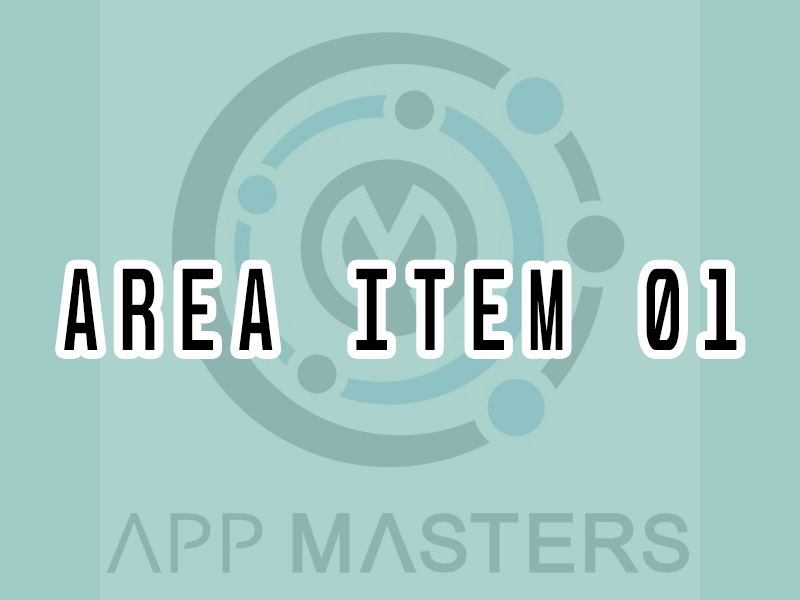
<style>
.page{position:relative;width:800px;height:600px;background:#abd2cd}
.page>*{position:absolute;margin:0}
.t1{font:100.3px "Unispace-Bold";letter-spacing:0.34em;color:#000000;text-transform:uppercase;scale:0.61 1}
</style>
<div class="page">
<p class="t1" style="left:64px;top:268px;width:673px;height:82px">Area Item 01</p>
</div>
